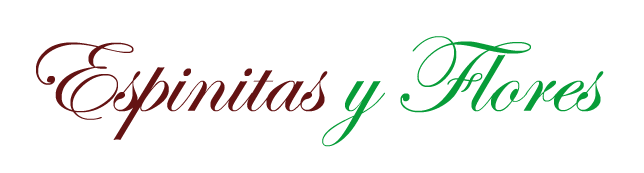
<style>
.page{position:relative;width:644px;height:173px;background:#ffffff}
.page>*{position:absolute;margin:0}
.t1{font:110.6px "EdwardianScriptITC";color:#641313}
.t2{font:110.6px "EdwardianScriptITC";color:#079c38}
</style>
<div class="page">
<p class="t1" style="left:36px;top:36px;width:568px;height:111px">Espinitas <span class="t2">y Flores</span></p>
</div>
